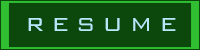
<style>
.page{position:relative;width:200px;height:50px;background:#0c470c}
.page>*{position:absolute;margin:0}
.t1{font:25px "BankGothicBT-Light";letter-spacing:0.28em;color:#b8e7f8}
</style>
<div class="page">
<p class="t1" style="left:28px;top:18px;width:148px;height:13px">RESUME</p>
</div>
